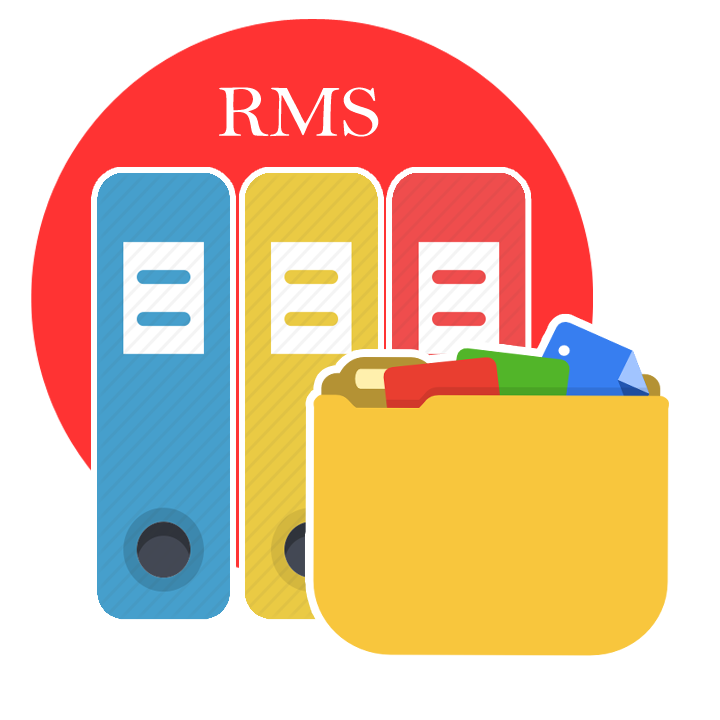
<style>
.page{position:relative;width:720px;height:720px;background:#ffffff}
.page>*{position:absolute;margin:0}
.t1{font:74.3px "BellMT";color:#ffffff;scale:1.04 1}
</style>
<div class="page">
<p class="t1" style="left:219px;top:87px;width:160px;height:50px">RMS</p>
</div>
